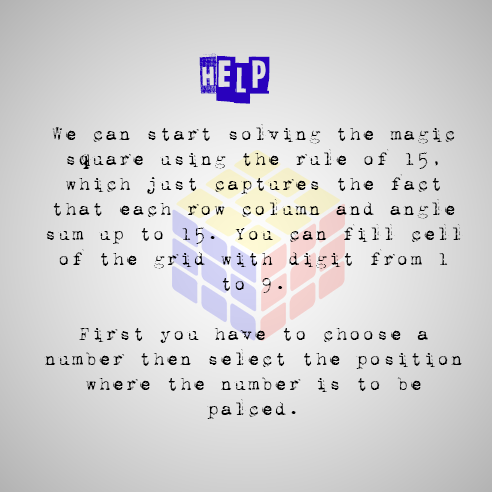
<style>
.page{position:relative;width:492px;height:492px}
.page>*{position:absolute;margin:0}
.t1{font:69.4px "Slaveonlydreamstobeking";color:#2901bd}
.t2{font:20.8px "1942report";color:#000000}
</style>
<div class="page">
<p class="t1" style="left:199px;top:53px;width:71px;height:51px">HELP</p>
<p class="t2" style="left:44px;top:124px;width:419px;height:295px;text-align:center">We can start solving the magic square using the rule of 15, which just captures the fact that each row column and angle sum up to 15. You can fill cell of the grid with digit from 1 to 9.<br><br>First you have to choose a number then select the position where the number is to be palced.</p>
</div>
